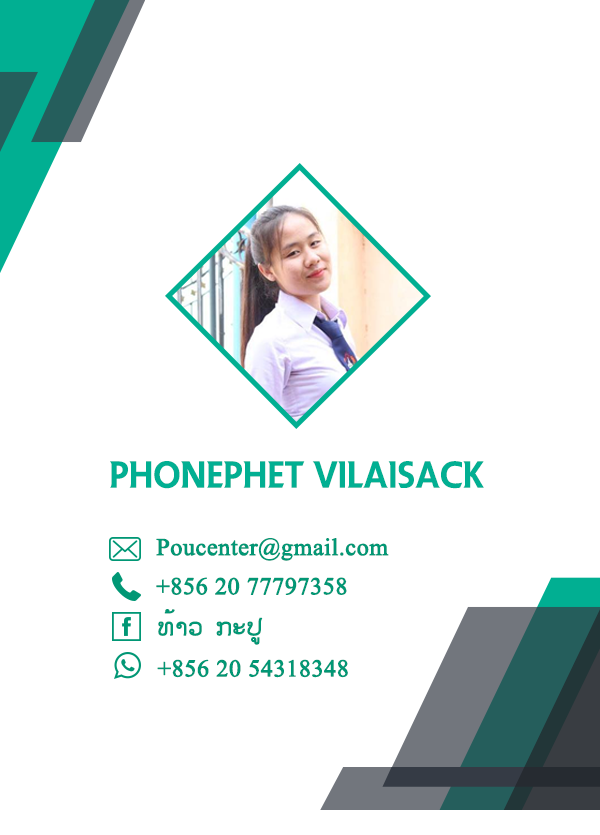
<style>
.page{position:relative;width:600px;height:835px;background:#ffffff}
.page>*{position:absolute;margin:0}
.t1{font:36px "PremierLeague";color:#01af92}
.t2{font:24px "TimesNewRomanPSMT";color:#019775;font-weight:bold}
.t3{font:24px "SaysetthaOT";color:#019775;font-weight:bold}
</style>
<div class="page">
<p class="t1" style="left:110px;top:461px;width:374px;height:28px">Phonephet vilaisack</p>
<p class="t2" style="left:156px;top:538px;width:233px;height:23px">Poucenter@gmail.com</p>
<p class="t2" style="left:156px;top:577px;width:191px;height:18px">+856 20 77797358</p>
<p class="t3" style="left:158px;top:609px;width:105px;height:36px">ທ້າວ ກະ​ປູ</p>
<p class="t2" style="left:157px;top:659px;width:191px;height:19px">+856 20 54318348</p>
</div>
